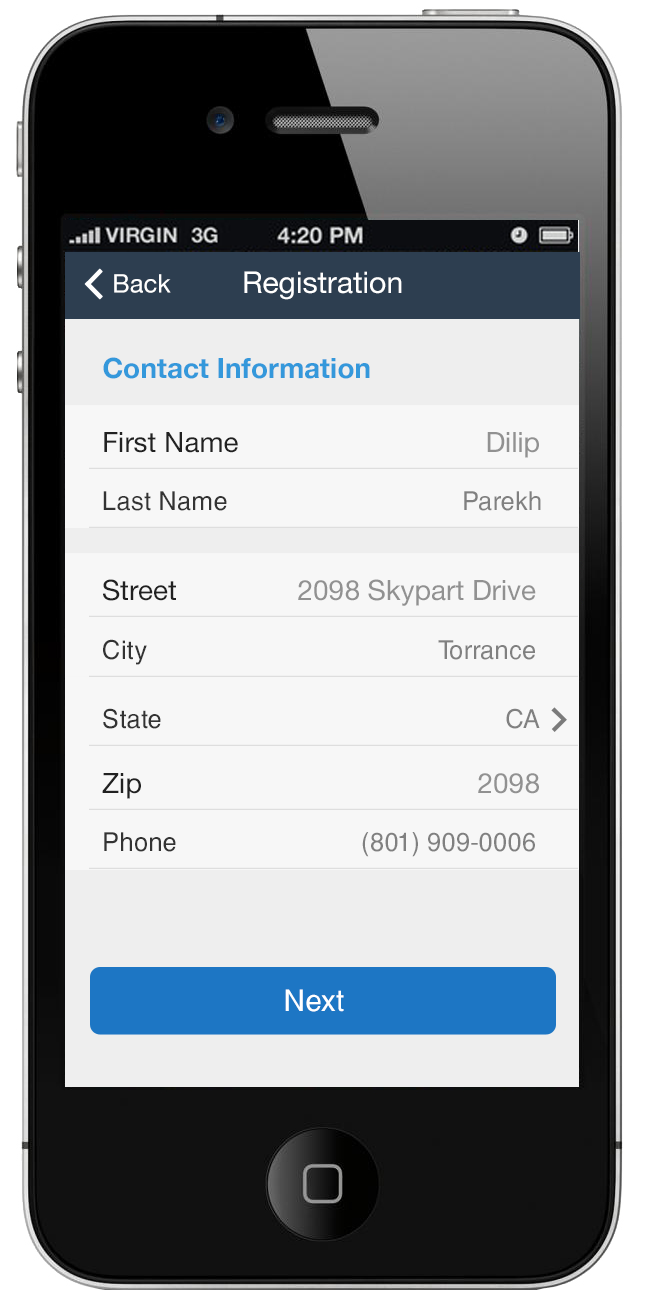
<style>
.page{position:relative;width:648px;height:1300px;background:#f7f7f7}
.page>*{position:absolute;margin:0}
.t1{font:25.5px "HelveticaNeue";color:#ffffff}
.t2{font:30px "HelveticaNeue";color:#ffffff}
.t3{font:28px "HelveticaNeue-Bold";color:#3498db}
.t4{font:28px "HelveticaNeue";color:#212121}
.t5{font:28px "HelveticaNeue";color:#919191}
.t6{font:26px "HelveticaCyr-Upright";color:#333333}
.t7{font:26px "HelveticaCyr-Upright";color:#808080}
.t8{font:26px "MyriadPro-Regular";color:#808080}
.t9{font:30px "HelveticaCyr-Upright";color:#ffffff}
</style>
<div class="page">
<p class="t1" style="left:114px;top:274px;width:57px;height:19px">Back</p>
<p class="t2" style="left:244px;top:271px;width:158px;height:29px">Registration</p>
<p class="t3" style="left:103px;top:357px;width:267px;height:22px">Contact Information</p>
<p class="t4" style="left:104px;top:432px;width:435px;height:26px">First Name          <span class="t5">Dilip</span></p>
<p class="t6" style="left:103px;top:491px;width:438px;height:20px">Last Name               <span class="t7">Parekh</span></p>
<p class="t5" style="left:103px;top:579px;width:433px;height:27px"><span class="t4">Street     </span>2098 Skypart Drive</p>
<p class="t7" style="left:103px;top:639px;width:432px;height:26px"><span class="t6">City                  </span>Torrance</p>
<p class="t6" style="left:103px;top:708px;width:437px;height:21px">State                           <span class="t7">CA</span></p>
<p class="t5" style="left:102px;top:773px;width:437px;height:26px"><span class="t4">Zip               </span>2098</p>
<p class="t7" style="left:104px;top:832px;width:431px;height:25px"><span class="t6">Phone          </span>(801) 909<span class="t8">-</span>0006</p>
<p class="t9" style="left:285px;top:989px;width:59px;height:23px">Next</p>
</div>
